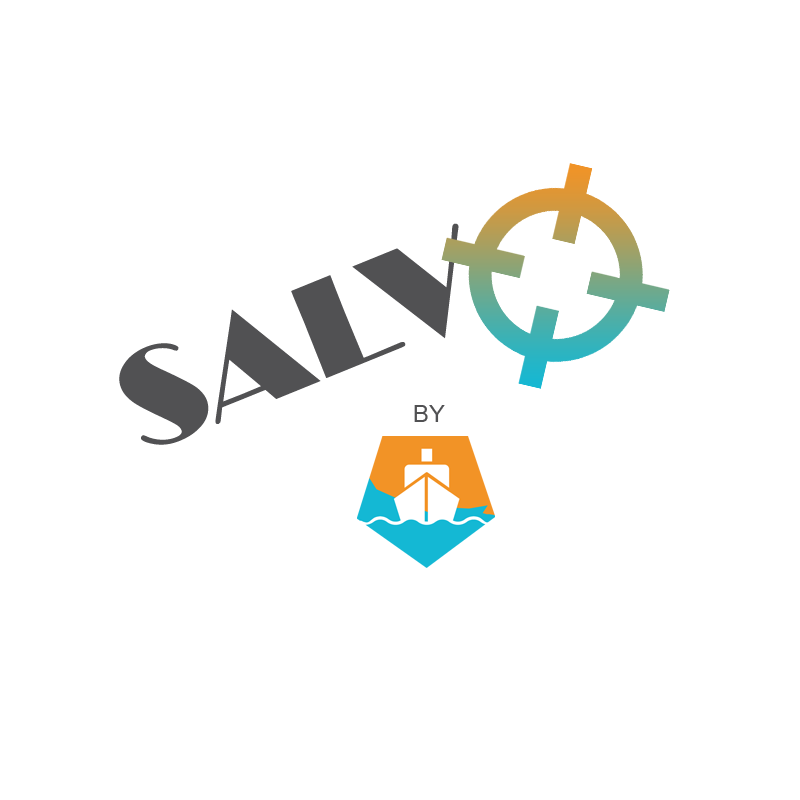
<style>
.page{position:relative;width:800px;height:800px;background:#ffffff}
.page>*{position:absolute;margin:0}
.t1{font:140.5px "Broadway";color:#515153}
.t2{font:24px "ArialMT";color:#515153}
</style>
<div class="page">
<p class="t1" style="left:119px;top:223px;width:340px;height:222px;rotate:-22deg">SALV</p>
<p class="t2" style="left:414px;top:405px;width:31px;height:17px">BY</p>
</div>
